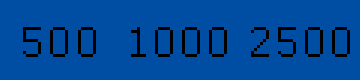
<style>
.page{position:relative;width:360px;height:80px;background:#004da4}
.page>*{position:absolute;margin:0}
.t1{font:48px "Courier";color:#000000}
</style>
<div class="page">
<p class="t1" style="left:23px;top:27px;width:73px;height:30px">500</p>
<p class="t1" style="left:131px;top:27px;width:96px;height:30px">1000</p>
<p class="t1" style="left:251px;top:27px;width:99px;height:30px">2500</p>
</div>
